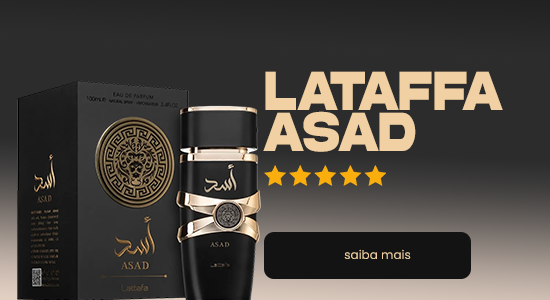
<style>
.page{position:relative;width:550px;height:300px;background:#2c2c2c}
.page>*{position:absolute;margin:0}
.t1{font:58.2px "AkiraExpanded-SuperBold";color:#f1d1a3;scale:0.69 1}
.t2{font:12px "Poppins-Regular";color:#f1d1a3}
</style>
<div class="page">
<p class="t1" style="left:265px;top:71px;width:238px;height:39px">LATAFFA</p>
<p class="t1" style="left:263px;top:111px;width:153px;height:41px">ASAD</p>
<p class="t2" style="left:344px;top:249px;width:67px;height:10px">saiba mais</p>
</div>
